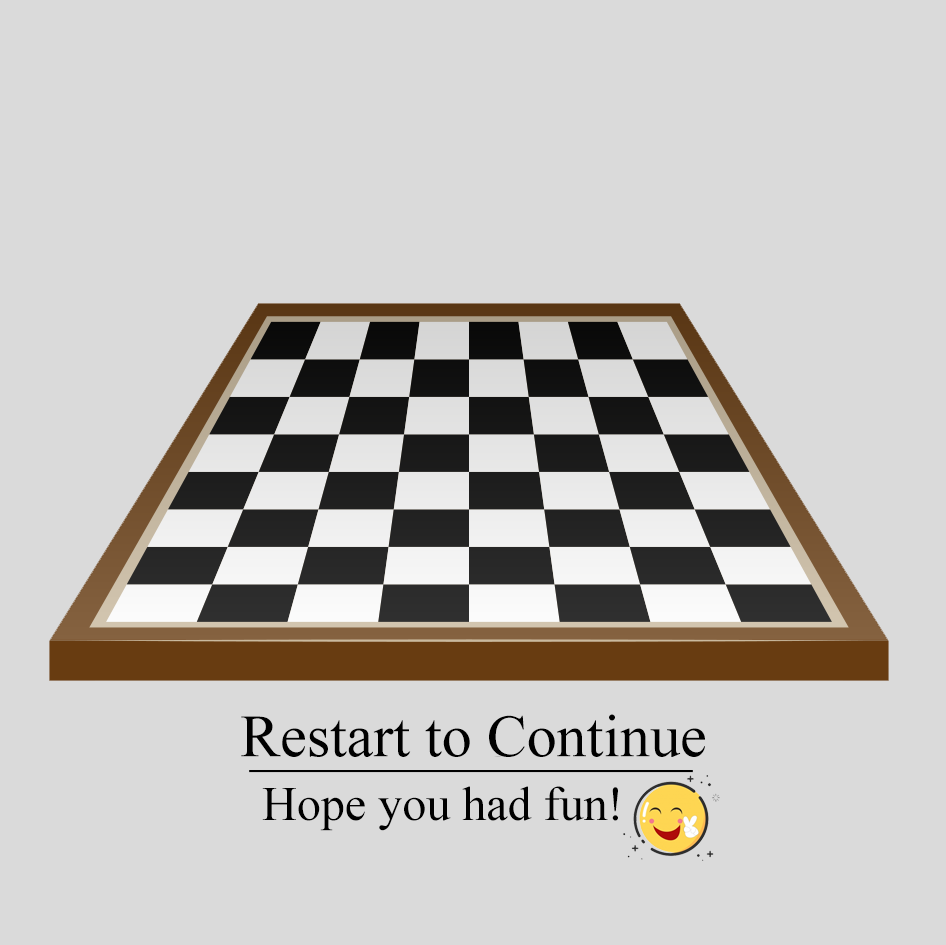
<style>
.page{position:relative;width:946px;height:945px;background:#dadada}
.page>*{position:absolute;margin:0}
.t1{font:60px "TimesNewRomanPSMT";color:#000000}
.t2{font:48px "TimesNewRomanPSMT";color:#000000}
</style>
<div class="page">
<p class="t1" style="left:241px;top:714px;width:464px;height:43px">Restart to Continue</p>
<p class="t2" style="left:262px;top:786px;width:356px;height:45px">Hope you had fun!</p>
</div>
